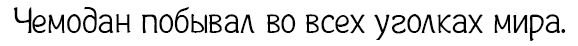
<style>
.page{position:relative;width:578px;height:46px;background:#ffffff}
.page>*{position:absolute;margin:0}
.t1{font:37px "Plainot";color:#000000}
</style>
<div class="page">
<p class="t1" style="left:13px;top:6px;width:553px;height:35px">Чемодан побывал во всех уголках мира.</p>
</div>
